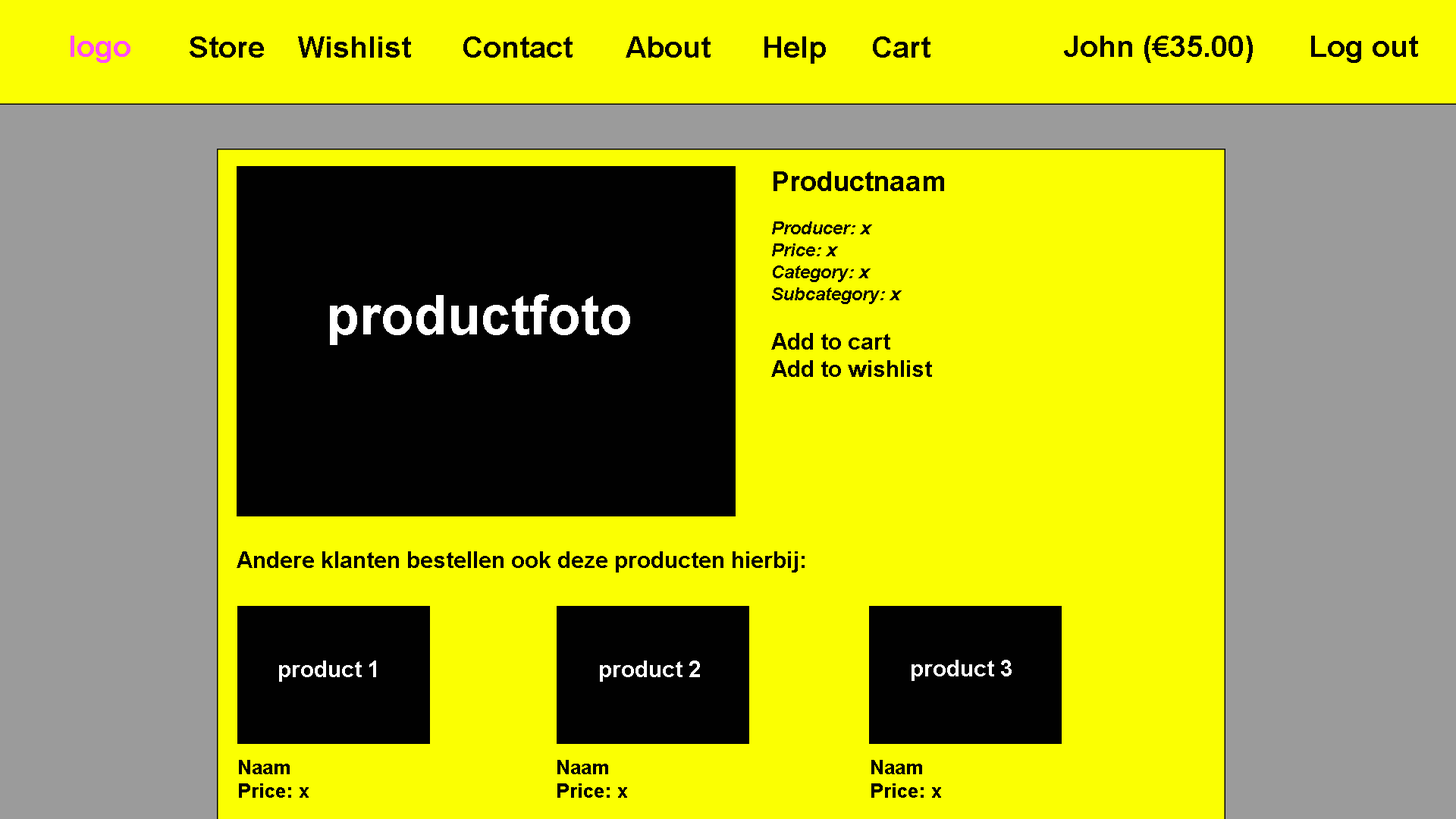
<style>
.page{position:relative;width:1456px;height:819px;background:#fbff02}
.page>*{position:absolute;margin:0}
.t1{font:29.6px "Arial-BoldMT";color:#ff4cff}
.t2{font:29.6px "Arial-BoldMT";color:#000000}
.t3{font:29.6px "Arial-BoldMT";color:#010101}
.t4{font:18.2px "Arial-BoldItalicMT";color:#010101}
.t5{font:27.3px "Arial-BoldMT";color:#010101}
.t6{font:22.7px "Arial-BoldMT";color:#010101}
.t7{font:54.6px "Arial-BoldMT";color:#ffffff}
.t8{font:22.7px "Arial-BoldMT";color:#000000}
.t9{font:22.7px "Arial-BoldMT";color:#ffffff}
.t10{font:19.7px "Arial-BoldMT";color:#010101}
</style>
<div class="page">
<p class="t1" style="left:71px;top:36px;width:59px;height:27px">logo</p>
<p class="t2" style="left:190px;top:36px;width:740px;height:28px">Store  Wishlist  Contact  About  Help  Cart</p>
<p class="t3" style="left:1064px;top:36px;width:354px;height:27px">John (€35.00)  Log out</p>
<p class="t4" style="left:771px;top:171px;width:173px;height:206px"><span class="t5">Productnaam<br></span><br>Producer: x<br>Price: x<br>Category: x<br>Subcategory: x<br><br><span class="t6">Add to cart<br>Add to wishlist</span></p>
<p class="t7" style="left:330px;top:294px;width:300px;height:51px">productfoto</p>
<p class="t8" style="left:237px;top:551px;width:568px;height:22px">Andere klanten bestellen ook deze producten hierbij:</p>
<p class="t9" style="left:279px;top:660px;width:97px;height:22px">product 1</p>
<p class="t9" style="left:600px;top:660px;width:100px;height:22px">product 2</p>
<p class="t9" style="left:912px;top:660px;width:100px;height:21px">product 3</p>
<p class="t10" style="left:239px;top:760px;width:70px;height:38px">Naam<br>Price: x</p>
<p class="t10" style="left:557px;top:760px;width:70px;height:38px">Naam<br>Price: x</p>
<p class="t10" style="left:871px;top:760px;width:70px;height:38px">Naam<br>Price: x</p>
</div>
